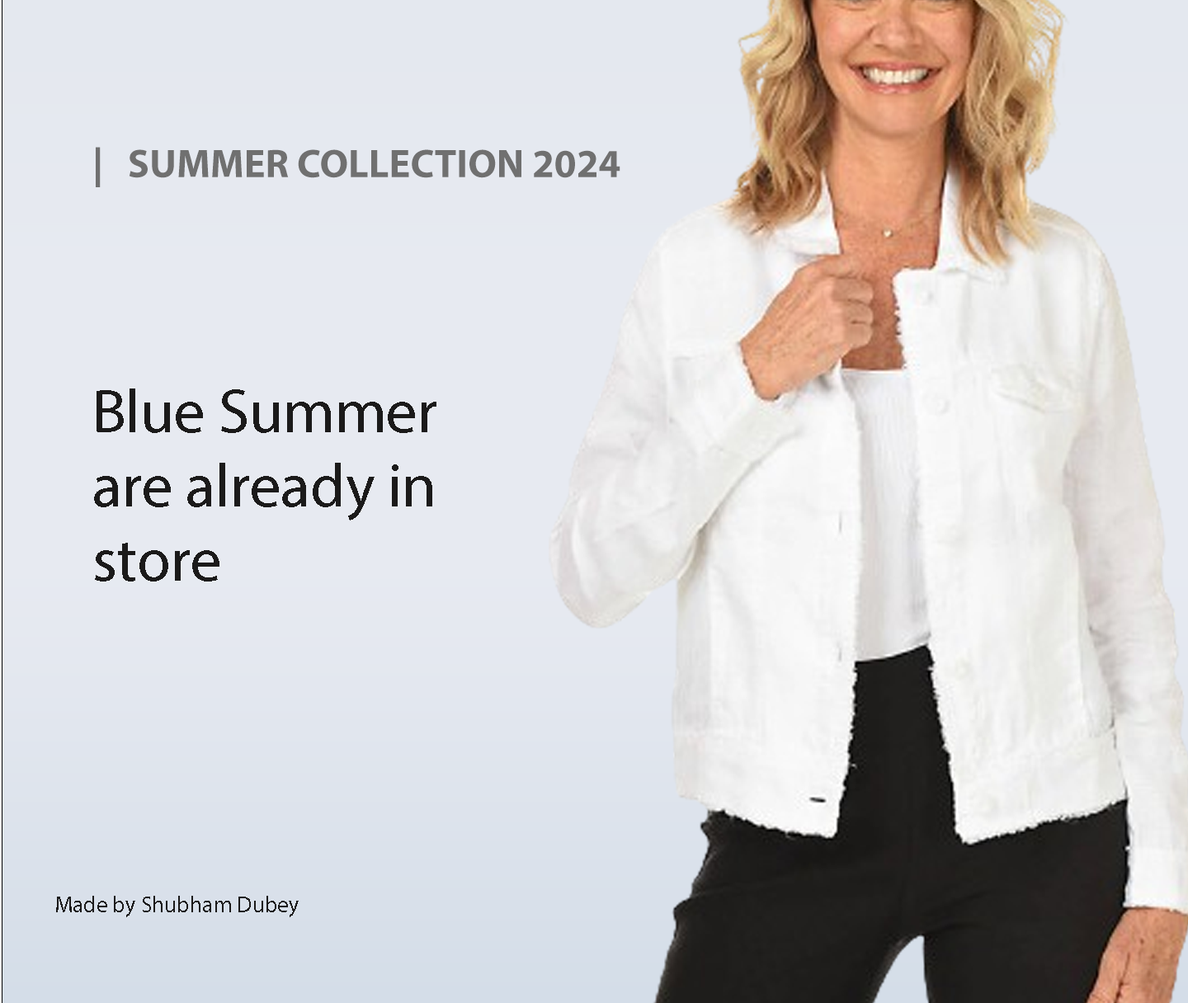
<style>
.page{position:relative;width:1188px;height:1003px}
.page>*{position:absolute;margin:0}
.t1{font:39.9px "MyriadPro-Bold";color:#707070}
.t2{font:61.9px "MyriadPro-Regular";color:#1b1a1a}
.t3{font:22.8px "MyriadPro-Regular";color:#1b1a1a}
</style>
<div class="page">
<p class="t1" style="left:96px;top:147px;width:525px;height:40px">|   SUMMER COLLECTION 2024</p>
<p class="t2" style="left:94px;top:389px;width:343px;height:193px">Blue Summer are already in store</p>
<p class="t3" style="left:56px;top:896px;width:243px;height:22px">Made by Shubham Dubey</p>
</div>
